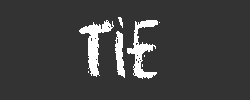
<style>
.page{position:relative;width:250px;height:100px;background:#333333}
.page>*{position:absolute;margin:0}
.t1{font:74.1px "Eraser-Regular";color:#ffffff;scale:0.68 1}
</style>
<div class="page">
<p class="t1" style="left:79px;top:17px;width:81px;height:62px">Tie</p>
</div>
